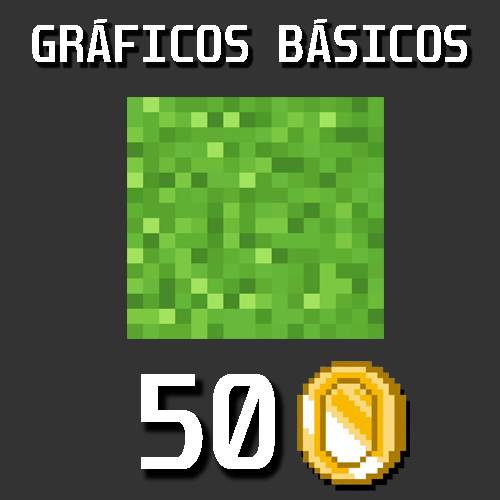
<style>
.page{position:relative;width:500px;height:500px;background:#333333}
.page>*{position:absolute;margin:0}
.t1{font:45px "Unispace-Bold";color:#ffffff}
.t2{font:117.4px "Unispace-Bold";color:#ffffff}
</style>
<div class="page">
<p class="t1" style="left:32px;top:19px;width:435px;height:43px">GRÁFICOS BÁSICOS</p>
<p class="t2" style="left:141px;top:374px;width:134px;height:95px">50</p>
</div>
